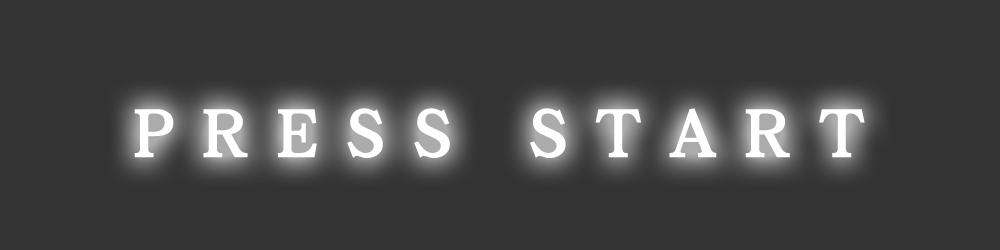
<style>
.page{position:relative;width:1000px;height:250px;background:#333333}
.page>*{position:absolute;margin:0}
.t1{font:72px "DFGanShinKei-W7-WINP-RKSJ-H";letter-spacing:0.35em;color:#ffffff}
</style>
<div class="page">
<p class="t1" style="left:134px;top:108px;width:731px;height:50px">PRESS START</p>
</div>
